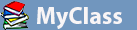
<style>
.page{position:relative;width:137px;height:30px;background:#7196be}
.page>*{position:absolute;margin:0}
.t1{font:24px "MyriadPro-Bold";color:#f8f5f6}
</style>
<div class="page">
<p class="t1" style="left:37px;top:7px;width:85px;height:22px">MyClass</p>
</div>
